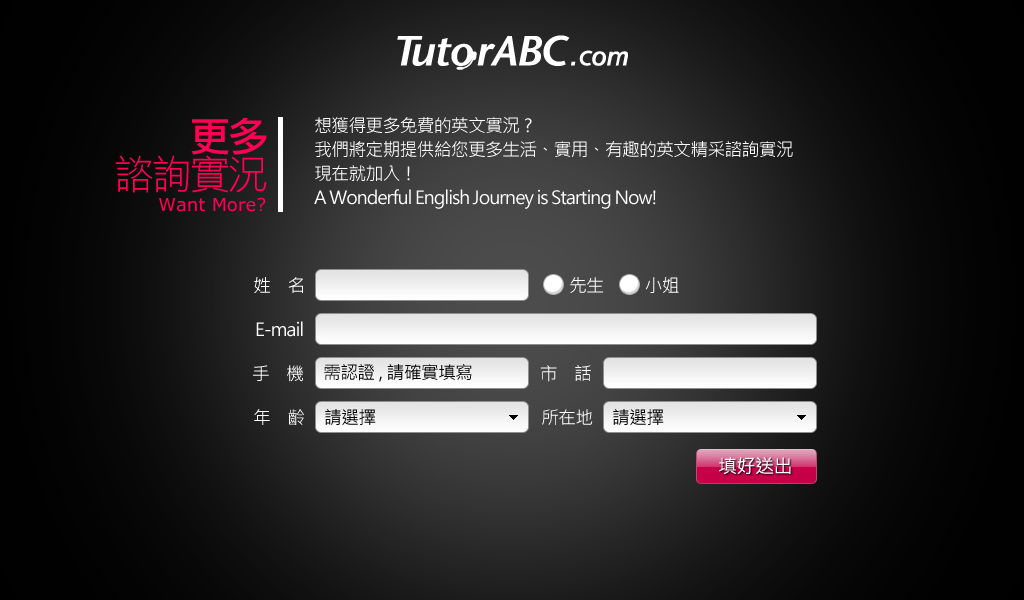
<style>
.page{position:relative;width:1024px;height:600px}
.page>*{position:absolute;margin:0}
.t1{font:40px/38px "DFLiHei-Lt-WIN-BF";letter-spacing:-0.05em;color:#ff0054}
.t2{font:40px/38px "DFLiHei-Md-WIN-BF";letter-spacing:-0.05em;color:#ff0054}
.t3{font:18px/24px "MicrosoftJhengHeiRegular";letter-spacing:-0.05em;color:#ffffff}
.t4{font:18px "Verdana";color:#ff0054}
.t5{font:18px "MicrosoftJhengHeiRegular";letter-spacing:-0.05em;color:#ffffff}
.t6{font:18px "MicrosoftJhengHeiRegular";letter-spacing:-0.05em;color:#000000}
.t7{font:19px "MicrosoftJhengHeiRegular";letter-spacing:-0.025em;color:#ffffff}
</style>
<div class="page">
<p class="t1" style="left:115px;top:117px;width:152px;height:76px;text-align:right"><span class="t2">更多<br></span>諮詢實況</p>
<p class="t3" style="left:314px;top:117px;width:479px;height:92px">想獲得更多免費的英文實況?<br>我們將定期提供給您更多生活、實用、有趣的英文精采諮詢實況<br>現在就加入！<br>A Wonderful English Journey is Starting Now!</p>
<p class="t4" style="left:159px;top:197px;width:107px;height:15px">Want More?</p>
<p class="t5" style="left:254px;top:277px;width:49px;height:17px">姓　名</p>
<p class="t5" style="left:570px;top:277px;width:109px;height:16px">先生　　  小姐</p>
<p class="t5" style="left:256px;top:321px;width:47px;height:16px">E-mail</p>
<p class="t5" style="left:253px;top:365px;width:50px;height:17px">手　機</p>
<p class="t6" style="left:324px;top:364px;width:148px;height:18px">需認證,請確實填寫</p>
<p class="t5" style="left:540px;top:365px;width:51px;height:17px">市　話</p>
<p class="t5" style="left:254px;top:409px;width:50px;height:16px">年　齡</p>
<p class="t6" style="left:325px;top:409px;width:51px;height:16px">請選擇</p>
<p class="t5" style="left:542px;top:409px;width:51px;height:16px">所在地</p>
<p class="t6" style="left:613px;top:409px;width:51px;height:16px">請選擇</p>
<p class="t7" style="left:719px;top:457px;width:72px;height:18px">填好送出</p>
</div>
